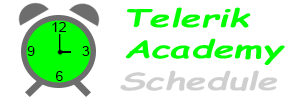
<style>
.page{position:relative;width:300px;height:100px;background:#ffffff}
.page>*{position:absolute;margin:0}
.t1{font:24.7px "ComicSansMS-BoldItalic";color:#00ff00;scale:1.5 1}
.t2{font:13.3px "ArialMT";color:#000000;scale:1.03 1}
.t3{font:24.7px "ComicSansMS-BoldItalic";color:#cfcfcf;scale:1.5 1}
</style>
<div class="page">
<p class="t1" style="left:127px;top:7px;width:124px;height:21px">Telerik</p>
<p class="t2" style="left:52px;top:22px;width:14px;height:10px">12</p>
<p class="t1" style="left:125px;top:38px;width:160px;height:27px">Academy</p>
<p class="t2" style="left:27px;top:46px;width:8px;height:10px">9</p>
<p class="t2" style="left:82px;top:46px;width:8px;height:10px">3</p>
<p class="t2" style="left:56px;top:71px;width:7px;height:10px">6</p>
<p class="t3" style="left:120px;top:70px;width:157px;height:21px">Schedule</p>
</div>
